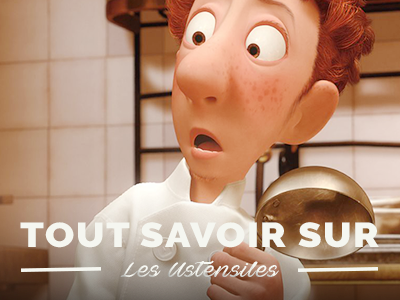
<style>
.page{position:relative;width:400px;height:300px}
.page>*{position:absolute;margin:0}
.t1{font:34.5px "Raleway-Black";letter-spacing:0.04em;color:#f5f6f0;scale:1.11 1}
.t2{font:20.7px "AveBetwanPERSONALUSEONLY";letter-spacing:0.04em;color:#f5f6f0;scale:1.11 1}
</style>
<div class="page">
<p class="t1" style="left:20px;top:222px;width:359px;height:26px">TOUT SAVOIR SUR</p>
<p class="t2" style="left:120px;top:260px;width:159px;height:18px">Les Ustensiles</p>
</div>
